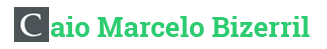
<style>
.page{position:relative;width:327px;height:49px;background:#ffffff}
.page>*{position:absolute;margin:0}
.t1{font:28px "RobotoSlab-Bold";color:#2ecc71}
</style>
<div class="page">
<p class="t1" style="left:51px;top:16px;width:259px;height:21px">aio Marcelo Bizerril</p>
</div>
